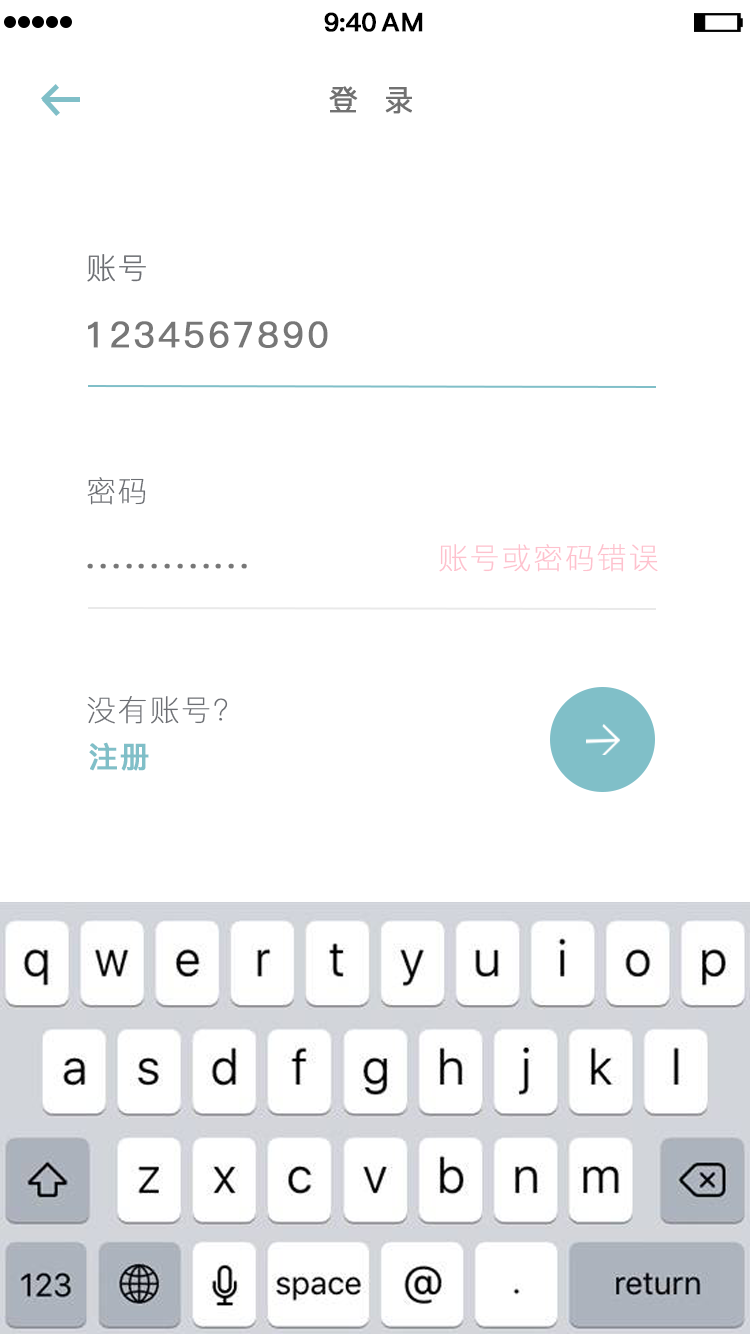
<style>
.page{position:relative;width:750px;height:1334px;background:#ffffff}
.page>*{position:absolute;margin:0}
.t1{font:25.4px "PingFang-SC-Bold";letter-spacing:-0.028em;color:#000000;font-weight:bold}
.t2{font:25.4px "PingFang-SC-Bold";letter-spacing:0.052em;color:#000000;font-weight:bold}
.t3{font:29.4px "PingFang-SC-Medium";letter-spacing:0.052em;color:#717171;font-weight:bold}
.t4{font:29.4px "PingFang-SC-ExtraLight";letter-spacing:0.052em;color:#6c6e73;font-weight:bold}
.t5{font:35.4px "PingFang-SC-Medium";letter-spacing:0.072em;color:#777777;font-weight:bold}
.t6{font:29.4px "PingFang-SC-ExtraLight";letter-spacing:0.052em;color:#fec1cd;font-weight:bold}
.t7{font:29.4px "PingFang-SC-Bold";letter-spacing:0.052em;color:#80bfc8;font-weight:bold}
</style>
<div class="page">
<p class="t1" style="left:324px;top:12px;width:52px;height:20px">9:40</p>
<p class="t2" style="left:381px;top:12px;width:42px;height:20px">AM</p>
<p class="t3" style="left:329px;top:86px;width:83px;height:28px">登  录</p>
<p class="t4" style="left:87px;top:254px;width:59px;height:28px">账号</p>
<p class="t5" style="left:88px;top:321px;width:240px;height:27px">1234567890</p>
<p class="t4" style="left:87px;top:477px;width:59px;height:28px">密码</p>
<p class="t6" style="left:439px;top:544px;width:219px;height:28px">账号或密码错误</p>
<p class="t5" style="left:87px;top:563px;width:160px;height:6px">.............</p>
<p class="t4" style="left:87px;top:696px;width:141px;height:28px">没有账号？</p>
<p class="t7" style="left:89px;top:742px;width:60px;height:29px">注册</p>
</div>
